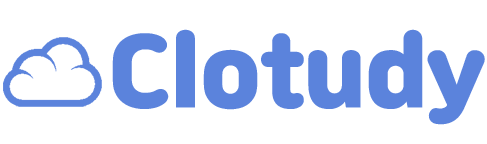
<style>
.page{position:relative;width:487px;height:144px;background:#ffffff}
.page>*{position:absolute;margin:0}
.t1{font:92px "Jalnan";color:#5b83dc}
</style>
<div class="page">
<p class="t1" style="left:112px;top:29px;width:373px;height:96px">Clotudy</p>
</div>
